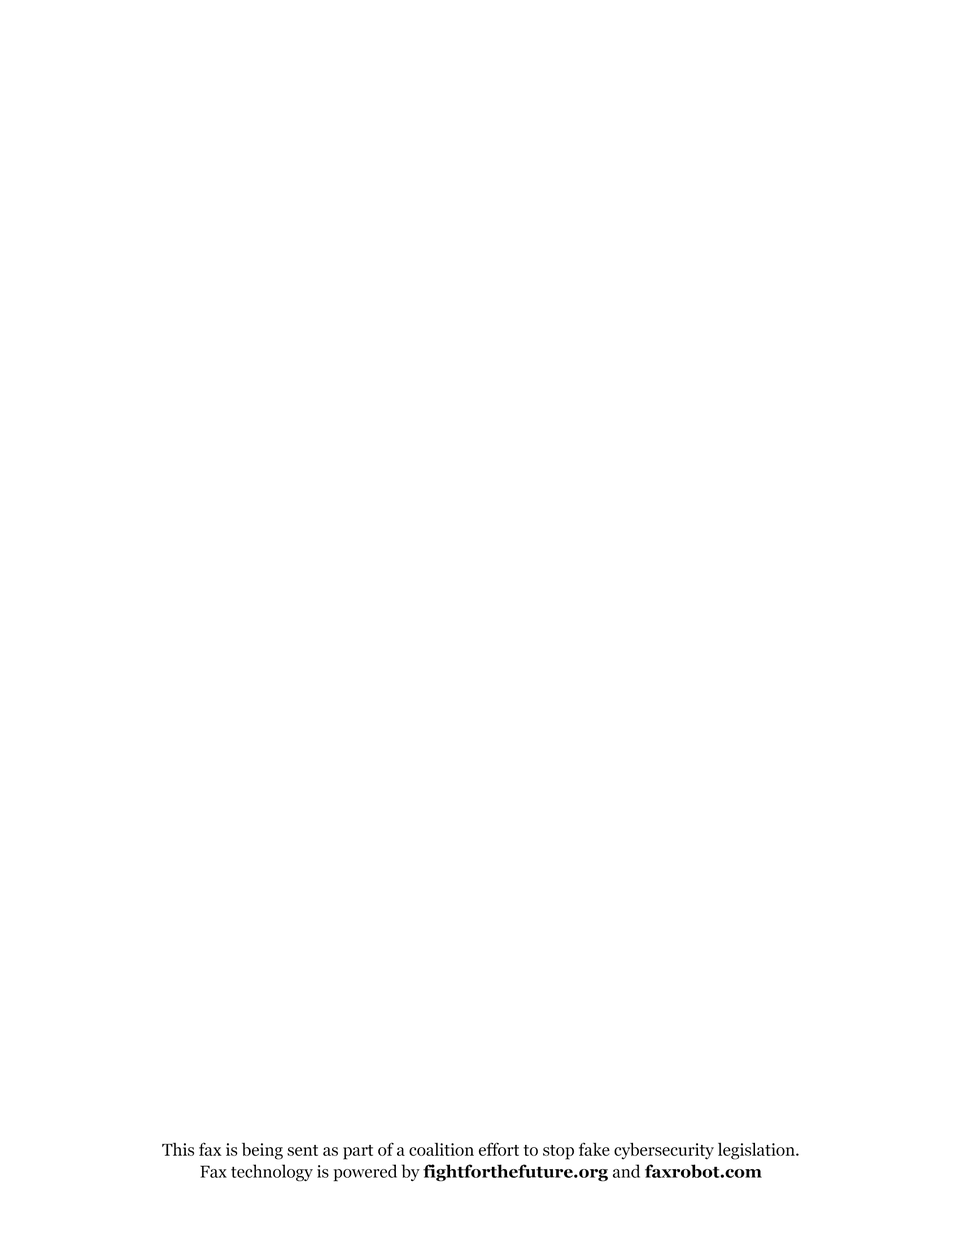
<style>
.page{position:relative;width:960px;height:1242px;background:#ffffff}
.page>*{position:absolute;margin:0}
.t1{font:16.9px/21.9px "Georgia";color:#000000}
.t2{font:16.9px/21.9px "Georgia-Bold";color:#000000}
</style>
<div class="page">
<p class="t1" style="left:162px;top:1143px;width:636px;height:39px;text-align:center">This fax is being sent as part of a coalition effort to stop fake cybersecurity legislation.<br>Fax technology is powered by <span class="t2">fightforthefuture.org </span>and<span class="t2"> faxrobot.com</span></p>
</div>
